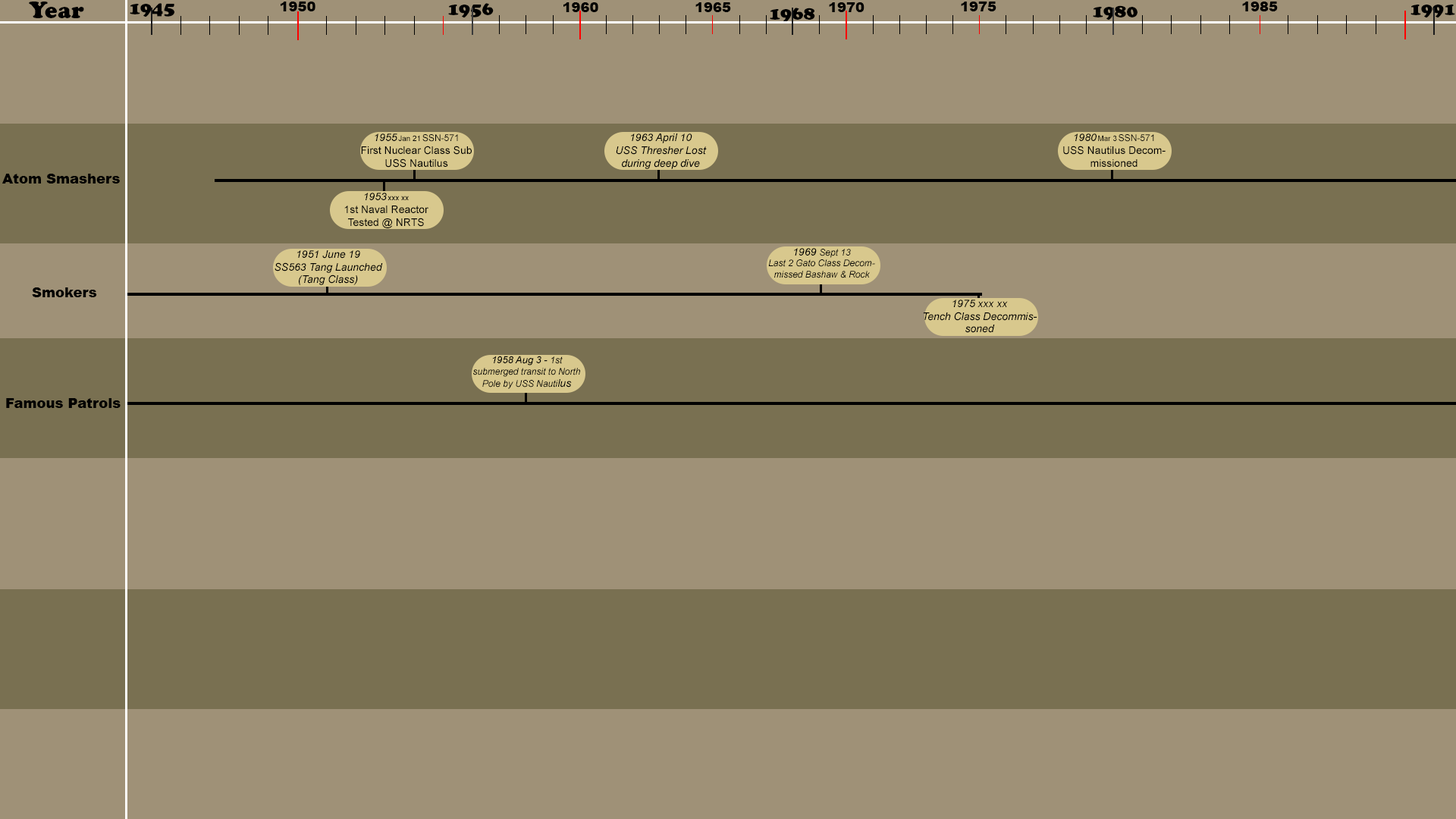
<style>
.page{position:relative;width:1456px;height:819px;background:#9f9177}
.page>*{position:absolute;margin:0}
.t1{font:22.7px "CooperBlackStd";color:#000000}
.t2{font:18.2px "CooperBlackStd";color:#000000}
.t3{font:13.6px "Arial-Black";color:#000000}
.t4{font:10.6px "ArialMT";color:#000000}
.t5{font:10.6px "Arial-ItalicMT";color:#000000}
.t6{font:7.6px "ArialMT";color:#000000}
.t7{font:9.1px "ArialMT";color:#000000}
.t8{font:9.1px "Arial-ItalicMT";color:#000000}
.t9{font:9.9px "Arial-ItalicMT";color:#000000}
</style>
<div class="page">
<p class="t1" style="left:29px;top:2px;width:55px;height:16px">Year</p>
<p class="t2" style="left:130px;top:3px;width:44px;height:14px">1945</p>
<p class="t3" style="left:281px;top:2px;width:34px;height:9px">1950</p>
<p class="t2" style="left:448px;top:3px;width:46px;height:15px">1956</p>
<p class="t3" style="left:563px;top:2px;width:35px;height:10px">1960</p>
<p class="t3" style="left:695px;top:2px;width:36px;height:10px">1965</p>
<p class="t3" style="left:829px;top:2px;width:35px;height:10px">1970</p>
<p class="t3" style="left:961px;top:2px;width:35px;height:9px">1975</p>
<p class="t2" style="left:1093px;top:5px;width:44px;height:15px">1980</p>
<p class="t3" style="left:1242px;top:2px;width:36px;height:9px">1985</p>
<p class="t2" style="left:1410px;top:5px;width:45px;height:13px">1991</p>
<p class="t2" style="left:770px;top:8px;width:45px;height:15px">1968</p>
<p class="t4" style="left:361px;top:133px;width:111px;height:35px;text-align:center"><span class="t5">1955 </span><span class="t6">Jan 21 </span><span class="t7">SSN-571<br></span>First Nuclear Class Sub<br>USS Nautilus</p>
<p class="t5" style="left:616px;top:133px;width:91px;height:36px;text-align:center">1963 April 10<br>USS Thresher Lost during deep dive</p>
<p class="t4" style="left:1063px;top:133px;width:103px;height:34px;text-align:center"><span class="t5">1980 </span><span class="t6">Mar 3 </span><span class="t7">SSN-571</span><br>USS Nautilus Decommissioned</p>
<p class="t3" style="left:2px;top:174px;width:118px;height:10px">Atom Smashers</p>
<p class="t4" style="left:344px;top:193px;width:84px;height:35px;text-align:center"><span class="t5">1953 </span><span class="t6">xxx xx</span><span class="t7"><br></span>1st Naval Reactor Tested @ NRTS</p>
<p class="t5" style="left:275px;top:250px;width:108px;height:35px;text-align:center">1951 June 19<br>SS563 Tang Launched (Tang Class)</p>
<p class="t8" style="left:768px;top:248px;width:107px;height:30px;text-align:center"><span class="t5">1969 </span>Sept 13<br>Last 2 Gato Class Decommissed Bashaw &amp; Rock</p>
<p class="t3" style="left:32px;top:287px;width:65px;height:10px">Smokers</p>
<p class="t5" style="left:923px;top:300px;width:114px;height:33px;text-align:center">1975 xxx xx<br>Tench Class Decommissoned</p>
<p class="t8" style="left:473px;top:356px;width:107px;height:33px;text-align:center"><span class="t9">1958 Aug 3 - </span>1st submerged transit to North Pole by USS Nauti<span class="t5">lus</span></p>
<p class="t3" style="left:6px;top:398px;width:115px;height:10px">Famous Patrols</p>
</div>
